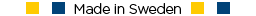
<style>
.page{position:relative;width:256px;height:16px;background:#ffffff}
.page>*{position:absolute;margin:0}
.t1{font:14px "Gotham-Light";letter-spacing:-0.025em;color:#000000}
</style>
<div class="page">
<p class="t1" style="left:74px;top:3px;width:107px;height:11px">Made in Sweden</p>
</div>
